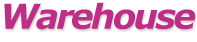
<style>
.page{position:relative;width:197px;height:42px;background:#ffffff}
.page>*{position:absolute;margin:0}
.t1{font:34.4px "Verdana-BoldItalic";letter-spacing:-0.075em;color:#c02d86}
</style>
<div class="page">
<p class="t1" style="left:4px;top:2px;width:192px;height:28px">Warehouse</p>
</div>
